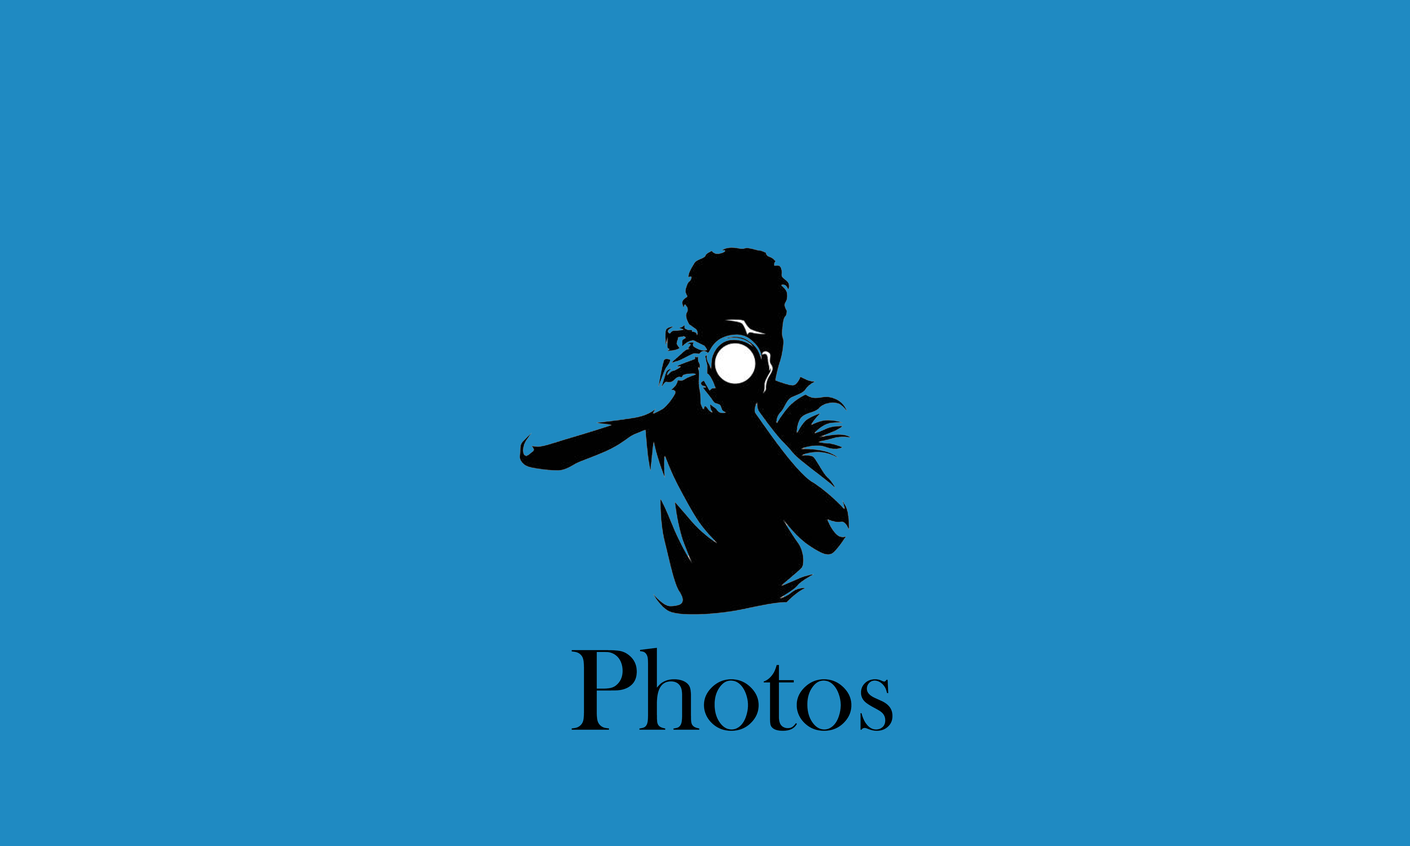
<style>
.page{position:relative;width:1410px;height:846px;background:#1f8ac2}
.page>*{position:absolute;margin:0}
.t1{font:119.4px "BaskOldFace";color:#000000}
</style>
<div class="page">
<p class="t1" style="left:572px;top:648px;width:320px;height:83px">Photos</p>
</div>
